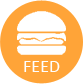
<style>
.page{position:relative;width:83px;height:84px;background:#ffa438}
.page>*{position:absolute;margin:0}
.t1{font:18px "Calibri";color:#ffffff}
</style>
<div class="page">
<p class="t1" style="left:24px;top:61px;width:36px;height:11px">FEED</p>
</div>
